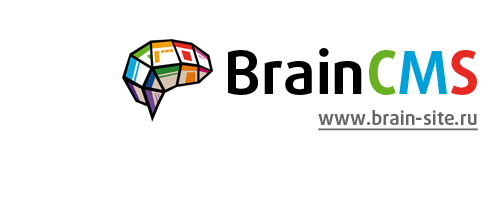
<style>
.page{position:relative;width:500px;height:200px;background:#ffffff}
.page>*{position:absolute;margin:0}
.t1{font:60px "DaxlinePro-Bold";color:#000000}
.t2{font:60px "DaxlinePro-Bold";color:#68b022}
.t3{font:60px "DaxlinePro-Bold";color:#02a0d9}
.t4{font:60px "DaxlinePro-Bold";color:#e42a22}
.t5{font:19px "DaxlinePro-Bold";color:#666666;text-decoration:underline}
</style>
<div class="page">
<p class="t1" style="left:228px;top:48px;width:249px;height:47px">Brain<span class="t2">C</span><span class="t3">M</span><span class="t4">S</span></p>
<p class="t5" style="left:318px;top:110px;width:160px;height:21px">www.brain-site.ru</p>
</div>
